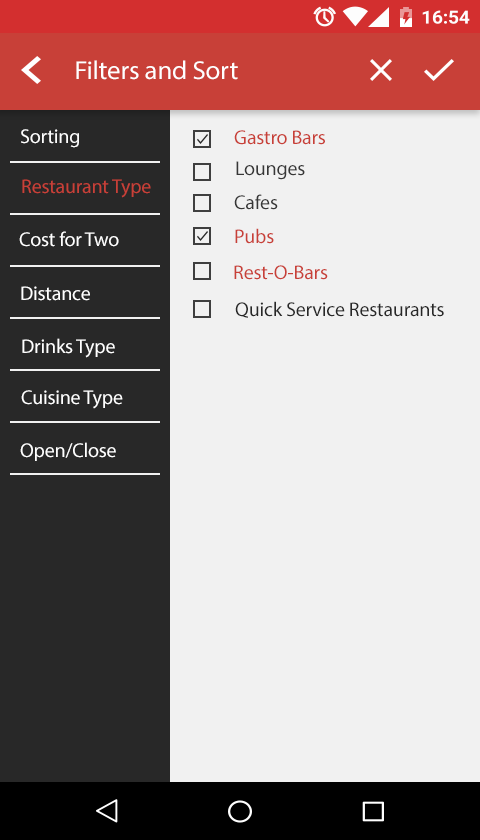
<style>
.page{position:relative;width:480px;height:840px;background:#f1f1f1}
.page>*{position:absolute;margin:0}
.t1{font:26.1px "MyriadPro-Regular";letter-spacing:-0.01em;color:#ffffff;scale:1.03 1}
.t2{font:20px "MyriadPro-Regular";letter-spacing:-0.01em;color:#fefefe}
.t3{font:20px "MyriadPro-Regular";letter-spacing:-0.01em;color:#c94038}
.t4{font:20px "MyriadPro-Regular";letter-spacing:-0.01em;color:#373737}
.t5{font:20px "MyriadPro-Regular";letter-spacing:-0.01em;color:#ffffff}
.t6{font:20px "MyriadPro-Regular";letter-spacing:-0.01em;color:#282828}
</style>
<div class="page">
<p class="t1" style="left:76px;top:60px;width:162px;height:20px">Filters and Sort</p>
<p class="t2" style="left:21px;top:129px;width:58px;height:19px">Sorting</p>
<p class="t3" style="left:234px;top:130px;width:91px;height:15px">Gastro Bars</p>
<p class="t4" style="left:236px;top:161px;width:69px;height:19px">Lounges</p>
<p class="t3" style="left:22px;top:179px;width:129px;height:19px">Restaurant Type</p>
<p class="t4" style="left:234px;top:194px;width:44px;height:16px">Cafes</p>
<p class="t5" style="left:19px;top:231px;width:100px;height:16px">Cost for Two</p>
<p class="t3" style="left:235px;top:228px;width:39px;height:16px">Pubs</p>
<p class="t3" style="left:234px;top:265px;width:94px;height:15px">Rest-O-Bars</p>
<p class="t5" style="left:21px;top:286px;width:69px;height:15px">Distance</p>
<p class="t6" style="left:235px;top:301px;width:209px;height:17px">Quick Service Restaurants</p>
<p class="t5" style="left:22px;top:338px;width:93px;height:20px">Drinks Type</p>
<p class="t5" style="left:21px;top:390px;width:102px;height:19px">Cuisine Type</p>
<p class="t5" style="left:20px;top:442px;width:96px;height:19px">Open/Close</p>
</div>
